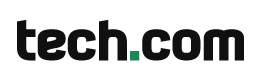
<style>
.page{position:relative;width:260px;height:79px;background:#ffffff}
.page>*{position:absolute;margin:0}
.t1{font:64.1px "Technoma";color:#101010}
.t2{font:64.1px "Technoma";color:#1d8757}
</style>
<div class="page">
<p class="t1" style="left:17px;top:19px;width:227px;height:42px">tech<span class="t2">.</span>com</p>
</div>
